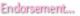
<style>
.page{position:relative;width:80px;height:16px;background:#ffffff}
.page>*{position:absolute;margin:0}
.t1{font:13.2px "Amira-Roman";letter-spacing:-0.02em;color:#ffbbdd;scale:0.91 1}
</style>
<div class="page">
<p class="t1" style="left:0px;top:2px;width:74px;height:11px">Endorsement...</p>
</div>
